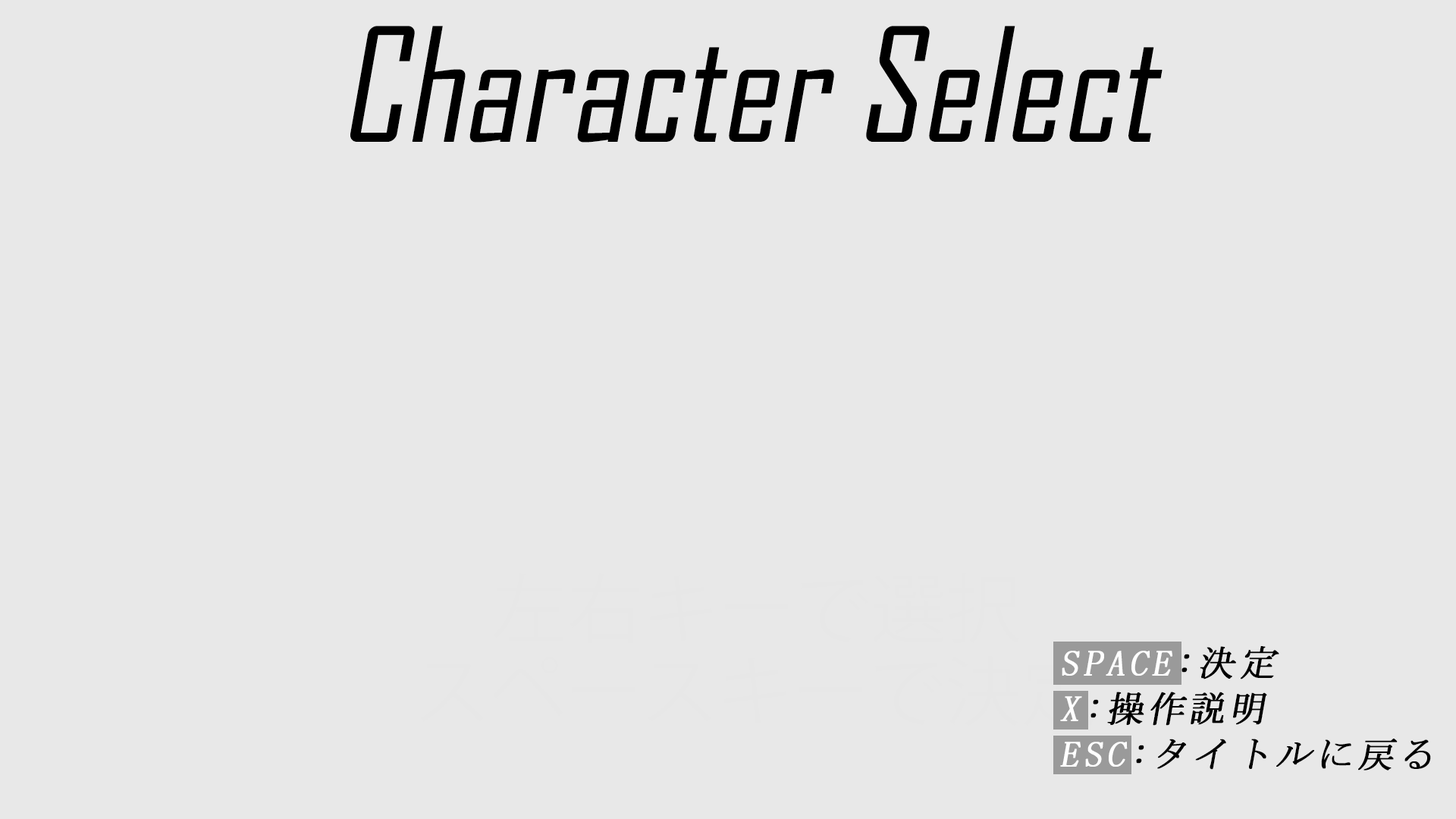
<style>
.page{position:relative;width:1456px;height:819px;background:#e8e8e8}
.page>*{position:absolute;margin:0}
.t1{font:36.4px/45.5px "MS-Mincho";letter-spacing:0.1em;color:#000000;font-weight:bold;font-style:italic}
.t2{font:36.4px/45.5px "MS-Mincho";letter-spacing:0.1em;color:#ffffff;font-weight:bold;font-style:italic}
</style>
<div class="page">
<p class="t1" style="left:1060px;top:646px;width:371px;height:124px"><span class="t2">SPACE</span>:決定<br><span class="t2">X</span>:操作説明<br><span class="t2">ESC</span>:タイトルに戻る</p>
</div>
